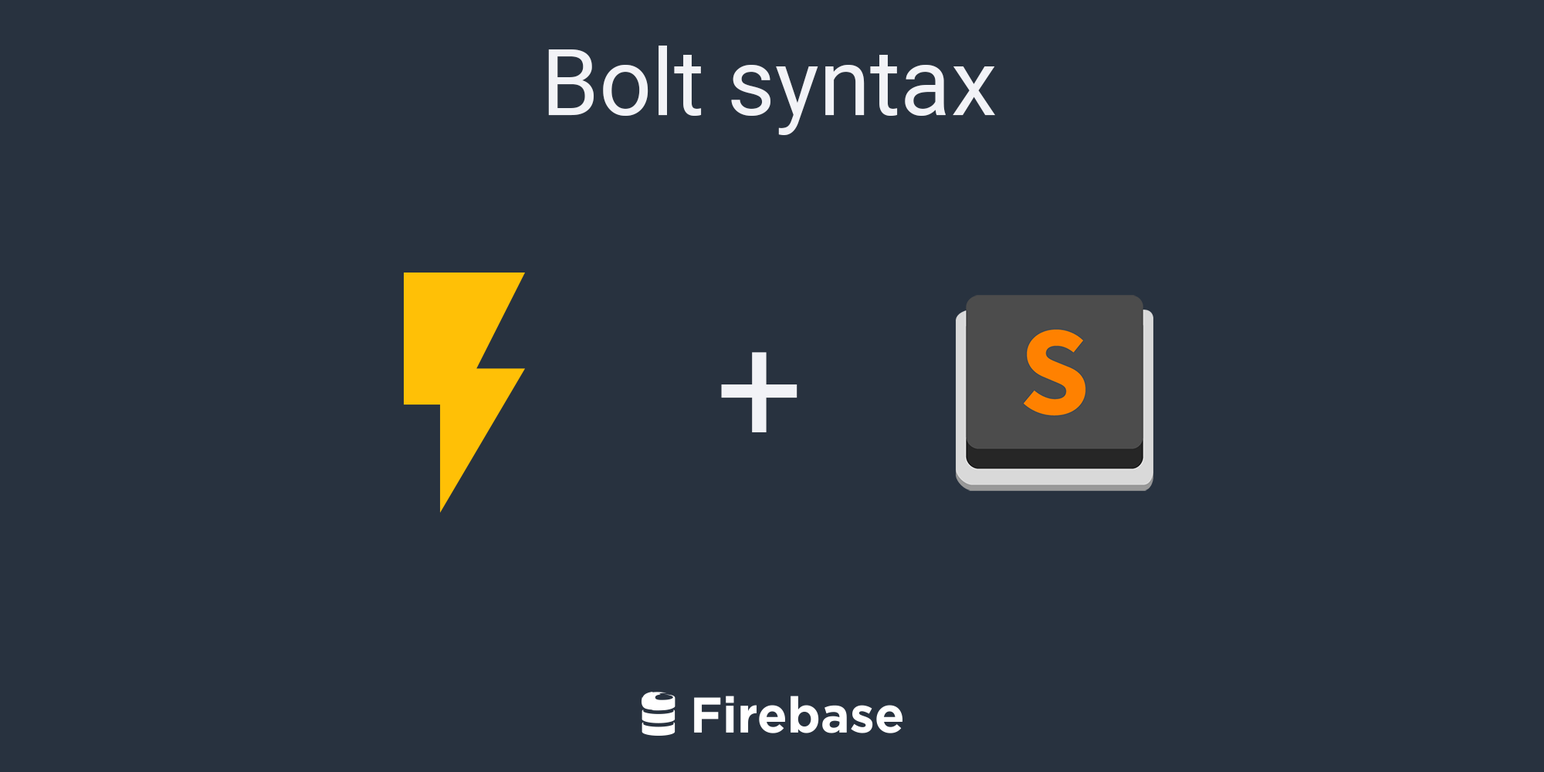
<style>
.page{position:relative;width:1544px;height:772px;background:#28323f}
.page>*{position:absolute;margin:0}
.t1{font:92.7px "Roboto-Regular";color:#f2f3f7}
.t2{font:154.4px "Roboto-Regular";color:#f2f3f7}
</style>
<div class="page">
<p class="t1" style="left:548px;top:46px;width:447px;height:89px">Bolt syntax</p>
<p class="t2" style="left:721px;top:352px;width:77px;height:80px">+</p>
</div>
